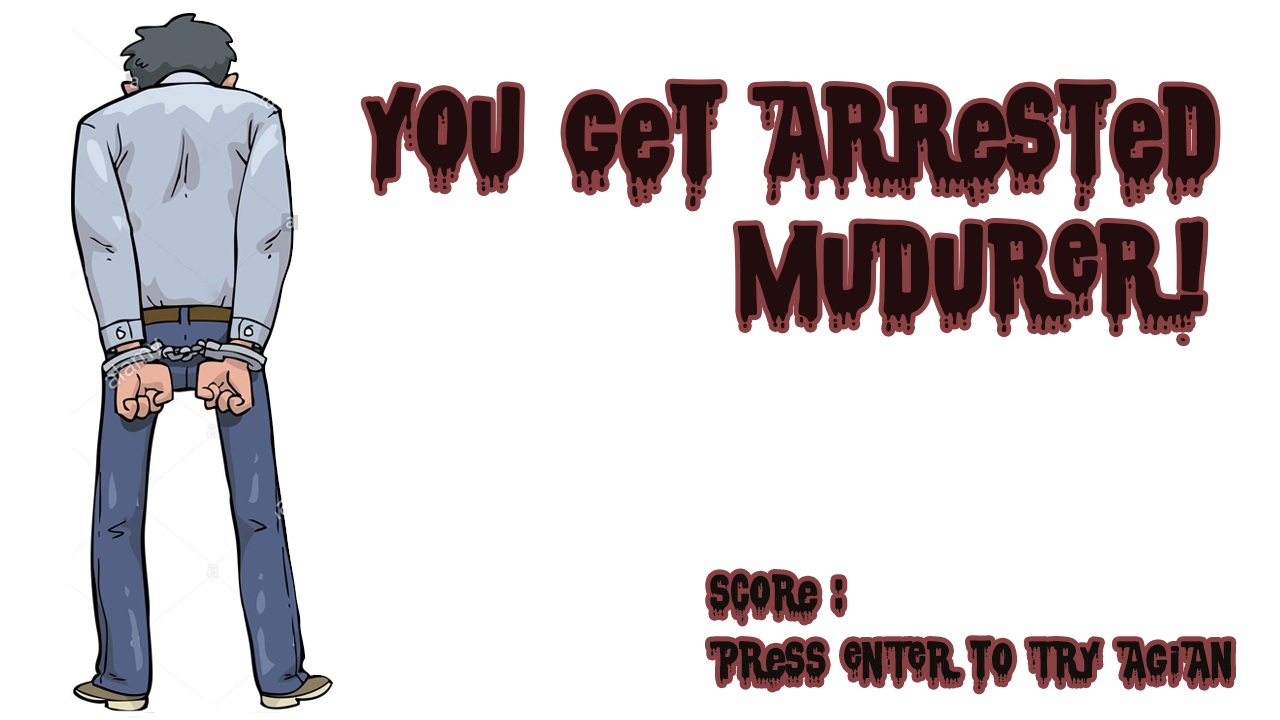
<style>
.page{position:relative;width:1280px;height:720px;background:#ffffff}
.page>*{position:absolute;margin:0}
.t1{font:114.1px "CSNPWDTNFI";color:#210d0e}
.t2{font:45.8px "CSNPWDTNFI";color:#130f0c}
</style>
<div class="page">
<p class="t1" style="left:365px;top:83px;width:851px;height:259px;text-align:right">You get arrested<br>MUDURER!</p>
<p class="t2" style="left:710px;top:573px;width:133px;height:49px">score :</p>
<p class="t2" style="left:710px;top:640px;width:522px;height:50px">Press ENTER to TRY AGIAN</p>
</div>
